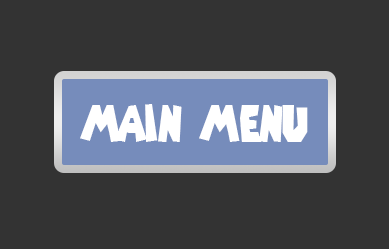
<style>
.page{position:relative;width:389px;height:249px;background:#333333}
.page>*{position:absolute;margin:0}
.t1{font:49.9px "SuperMarioGalaxy";color:#ffffff;scale:0.7 1}
</style>
<div class="page">
<p class="t1" style="left:80px;top:104px;width:228px;height:38px">main menu</p>
</div>
